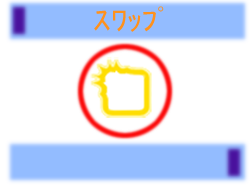
<style>
.page{position:relative;width:250px;height:185px;background:#ffffff}
.page>*{position:absolute;margin:0}
.t1{font:28.3px "MS-UIGothic";color:#ff921c}
</style>
<div class="page">
<p class="t1" style="left:94px;top:6px;width:70px;height:26px">ｽﾜｯﾌﾟ</p>
</div>
